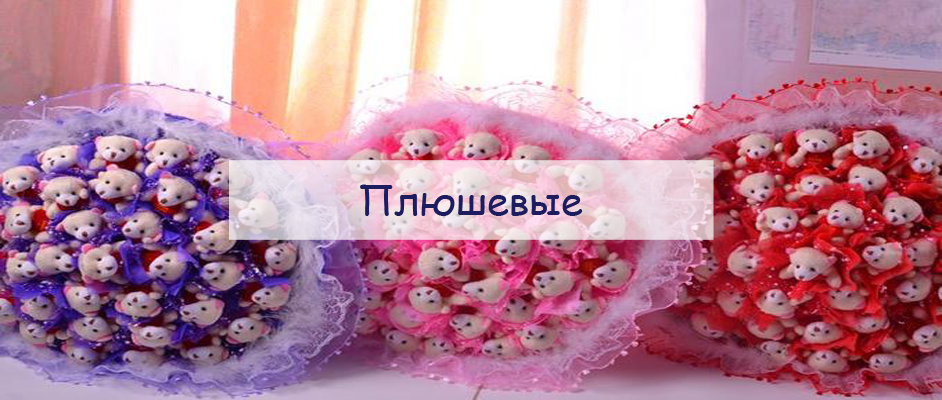
<style>
.page{position:relative;width:942px;height:400px}
.page>*{position:absolute;margin:0}
.t1{font:40px "ComicSansMS";color:#1d1c5e}
</style>
<div class="page">
<p class="t1" style="left:360px;top:184px;width:223px;height:32px">Плюшевые</p>
</div>
